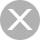
<style>
.page{position:relative;width:40px;height:40px;background:#b1b1b1}
.page>*{position:absolute;margin:0}
.t1{font:38.7px "NewsGothicMT";color:#ffffff;scale:1.45 1}
</style>
<div class="page">
<p class="t1" style="left:7px;top:9px;width:26px;height:21px">x</p>
</div>
